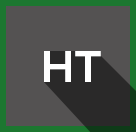
<style>
.page{position:relative;width:136px;height:132px;background:#545252}
.page>*{position:absolute;margin:0}
.t1{font:44px "NexaBold";color:#ffffff}
</style>
<div class="page">
<p class="t1" style="left:44px;top:51px;width:57px;height:31px">HT</p>
</div>
